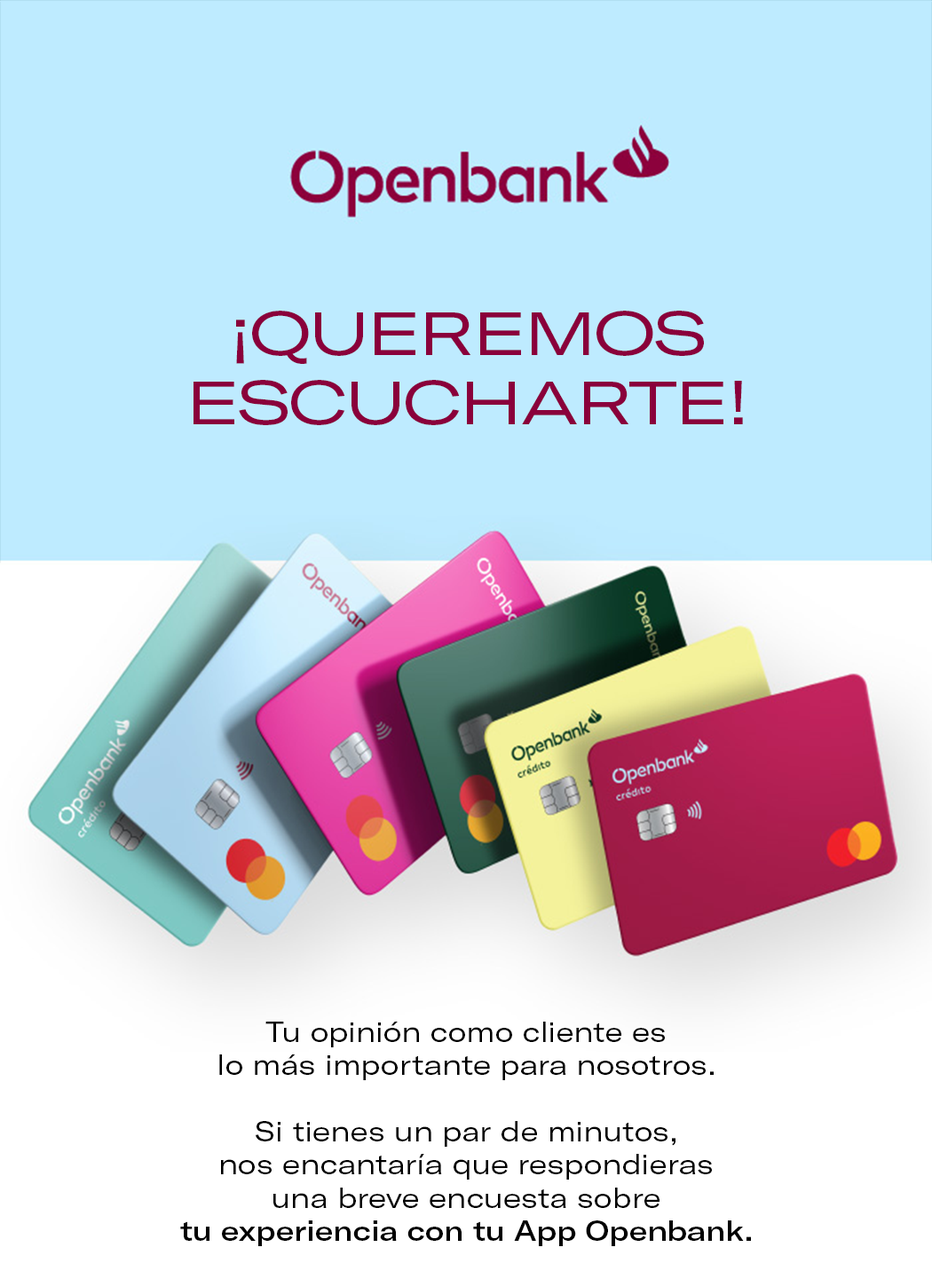
<style>
.page{position:relative;width:932px;height:1279px;background:#beebff}
.page>*{position:absolute;margin:0}
.t1{font:60.3px/69.2px "GTAmerica-ExpandedRegular";letter-spacing:-0.02em;color:#8a003b}
.t2{font:28px/33.3px "GTAmerica-ExtendedRegular";color:#000000}
.t3{font:28px/33.3px "GTAmerica-ExtendedMedium";color:#000000}
</style>
<div class="page">
<p class="t1" style="left:194px;top:311px;width:549px;height:114px;text-align:center">¡QUEREMOS<br>ESCUCHARTE!</p>
<p class="t2" style="left:219px;top:1022px;width:495px;height:58px;text-align:center">Tu opinión como cliente es<br>lo más importante para nosotros.</p>
<p class="t2" style="left:180px;top:1121px;width:571px;height:125px;text-align:center">Si tienes un par de minutos,<br>nos encantaría que respondieras<br>una breve encuesta sobre<br><span class="t3">tu experiencia con tu App Openbank.</span></p>
</div>
